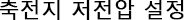
<style>
.page{position:relative;width:184px;height:20px;background:#ffffff}
.page>*{position:absolute;margin:0}
.t1{font:21px "MalgunGothic";color:#000000;font-weight:bold}
</style>
<div class="page">
<p class="t1" style="left:0px;top:0px;width:184px;height:21px">축전지 저전압 설정</p>
</div>
